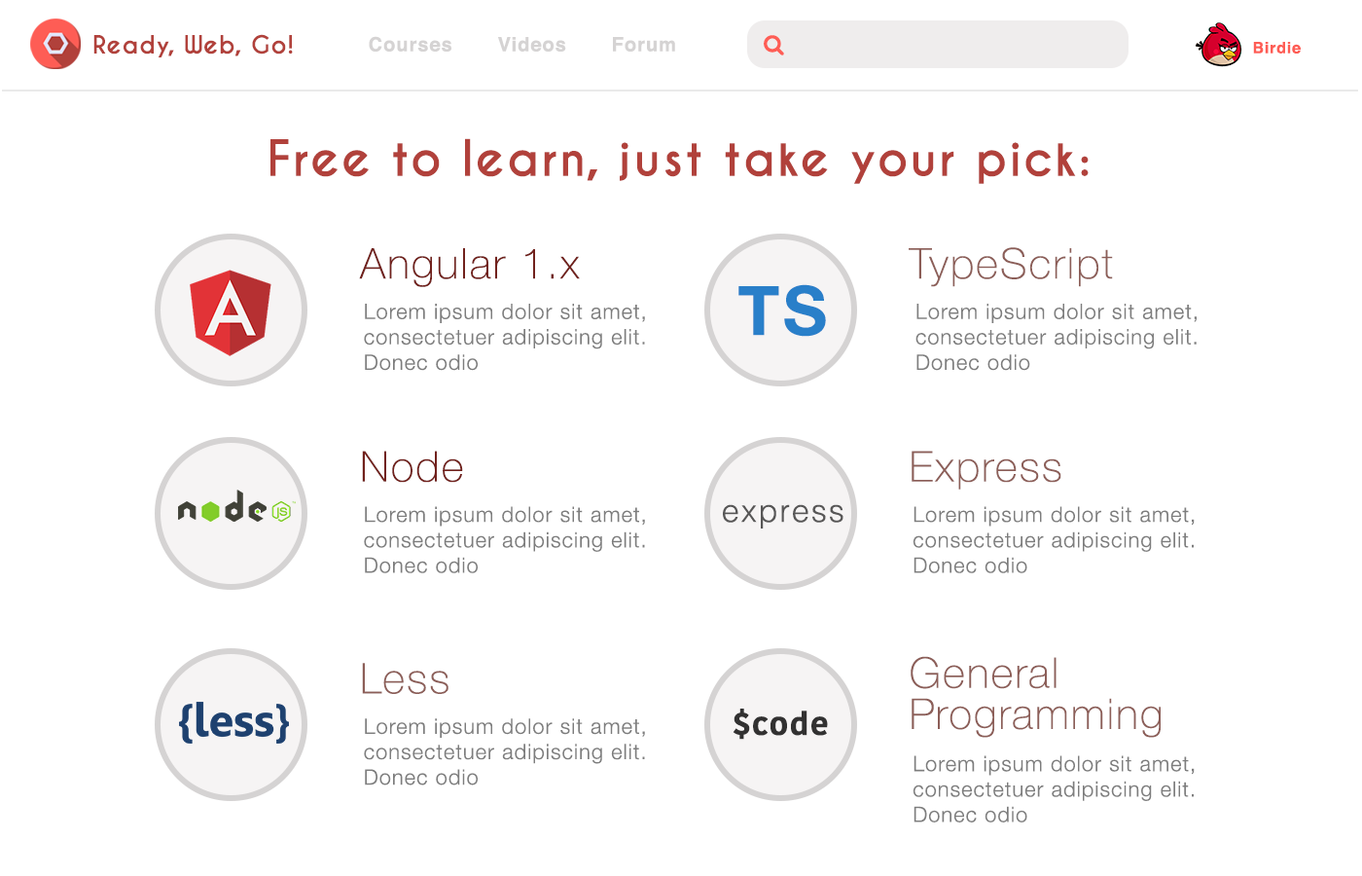
<style>
.page{position:relative;width:1362px;height:876px;background:#ffffff}
.page>*{position:absolute;margin:0}
.t1{font:23.3px "CaviarDreams-Bold";letter-spacing:0.05em;color:#b1413b}
.t2{font:19.5px "Helvetica-Bold";letter-spacing:0.05em;color:#d5d3d3}
.t3{font:15.6px "Helvetica-Bold";letter-spacing:0.05em;color:#fe5d55}
.t4{font:46.8px "CaviarDreams-Bold";letter-spacing:0.05em;color:#b1413b}
.t5{font:42.3px "HelveticaNeue-Thin";letter-spacing:0.05em;color:#71211c}
.t6{font:42.3px "HelveticaNeue-Thin";letter-spacing:0.05em;color:#8c5e58}
.t7{font:68.1px "HelveticaNeue-Bold";letter-spacing:0.05em;color:#297fc9}
.t8{font:21.2px "HelveticaNeue-Light";letter-spacing:0.05em;color:#7d7d7d}
.t9{font:31.8px "Helvetica-Light";letter-spacing:0.05em;color:#575656}
.t10{font:42.3px/41.1px "HelveticaNeue-Thin";letter-spacing:0.05em;color:#8c5e58}
.t11{font:31.8px "KohinoorBangla-Bold";letter-spacing:0.05em;color:#323131}
</style>
<div class="page">
<p class="t1" style="left:93px;top:34px;width:200px;height:23px">Ready, Web, Go!</p>
<p class="t2" style="left:369px;top:36px;width:306px;height:16px">Courses       Videos       Forum</p>
<p class="t3" style="left:1253px;top:42px;width:48px;height:12px">Birdie</p>
<p class="t4" style="left:270px;top:138px;width:819px;height:46px">Free to learn, just take your pick:</p>
<p class="t5" style="left:359px;top:248px;width:221px;height:39px">Angular 1.x</p>
<p class="t6" style="left:909px;top:247px;width:204px;height:40px">TypeScript</p>
<p class="t7" style="left:738px;top:284px;width:88px;height:53px">TS</p>
<p class="t8" style="left:364px;top:304px;width:281px;height:67px">Lorem ipsum dolor sit amet, consectetuer adipiscing elit. Donec odio</p>
<p class="t8" style="left:915px;top:304px;width:282px;height:67px">Lorem ipsum dolor sit amet, consectetuer adipiscing elit. Donec odio</p>
<p class="t5" style="left:362px;top:450px;width:101px;height:33px">Node</p>
<p class="t6" style="left:912px;top:450px;width:149px;height:39px">Express</p>
<p class="t8" style="left:364px;top:506px;width:281px;height:67px">Lorem ipsum dolor sit amet, consectetuer adipiscing elit. Donec odio</p>
<p class="t9" style="left:723px;top:504px;width:120px;height:24px">express</p>
<p class="t8" style="left:913px;top:506px;width:282px;height:67px">Lorem ipsum dolor sit amet, consectetuer adipiscing elit. Donec odio</p>
<p class="t6" style="left:362px;top:662px;width:86px;height:32px">Less</p>
<p class="t10" style="left:911px;top:656px;width:250px;height:81px">General Programming</p>
<p class="t11" style="left:733px;top:708px;width:95px;height:31px">$code</p>
<p class="t8" style="left:364px;top:718px;width:281px;height:67px">Lorem ipsum dolor sit amet, consectetuer adipiscing elit. Donec odio</p>
<p class="t8" style="left:913px;top:755px;width:282px;height:67px">Lorem ipsum dolor sit amet, consectetuer adipiscing elit. Donec odio</p>
</div>
